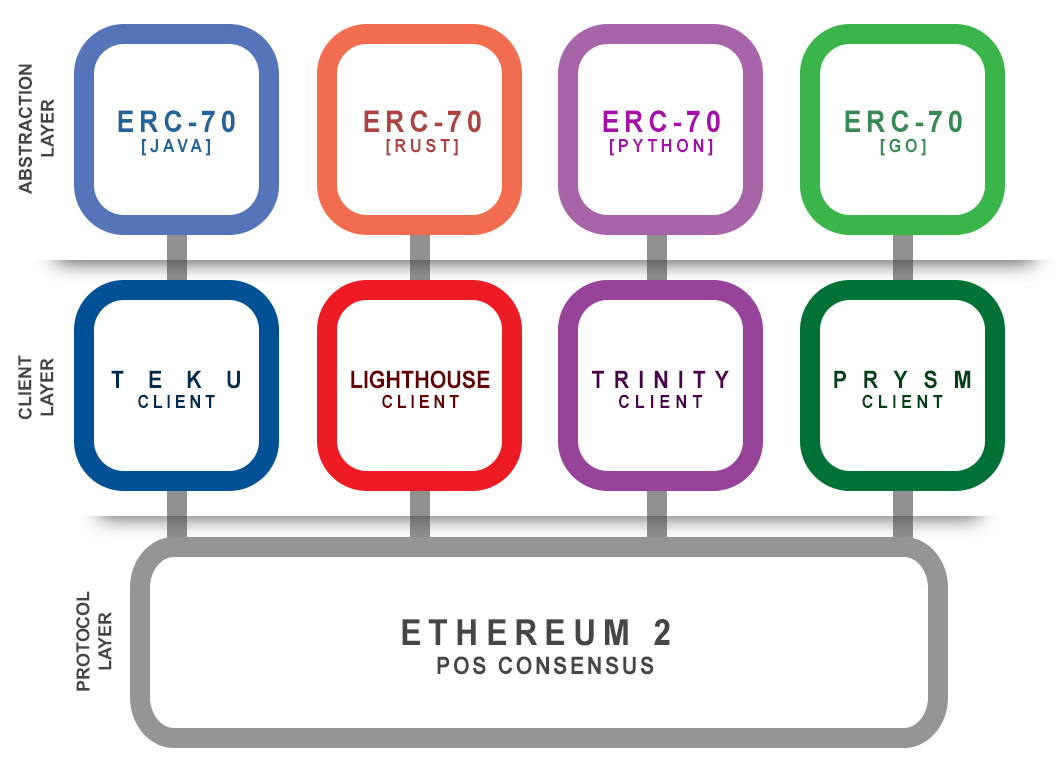
<style>
.page{position:relative;width:1061px;height:772px;background:#ffffff}
.page>*{position:absolute;margin:0}
.t1{font:18px/22px "Arial-BoldMT";color:#444444}
.t2{font:30px/19.6px "Arial-BoldMT";letter-spacing:0.18em;color:#23639b;scale:0.89 1}
.t3{font:18px/19.6px "Arial-BoldMT";letter-spacing:0.24em;color:#23639b;scale:0.89 1}
.t4{font:30px/19.6px "Arial-BoldMT";letter-spacing:0.18em;color:#af4141;scale:0.89 1}
.t5{font:18px/19.6px "Arial-BoldMT";letter-spacing:0.24em;color:#af4141;scale:0.89 1}
.t6{font:18px/19.6px "Arial-BoldMT";letter-spacing:0.24em;color:#a610aa;scale:0.89 1}
.t7{font:30px/19.6px "Arial-BoldMT";letter-spacing:0.18em;color:#a610aa;scale:0.89 1}
.t8{font:30px/19.6px "Arial-BoldMT";letter-spacing:0.18em;color:#388953;scale:0.89 1}
.t9{font:18px/19.6px "Arial-BoldMT";letter-spacing:0.24em;color:#388953;scale:0.89 1}
.t10{font:17.9px/21.9px "Arial-BoldMT";color:#444444}
.t11{font:18px/19.6px "Arial-BoldMT";letter-spacing:0.24em;color:#002b51;scale:0.89 1}
.t12{font:24px/19.6px "Arial-BoldMT";letter-spacing:1.12em;color:#002b51;scale:0.89 1}
.t13{font:24px/19.6px "Arial-BoldMT";color:#630000;scale:0.89 1}
.t14{font:18px/19.6px "Arial-BoldMT";letter-spacing:0.24em;color:#630000;scale:0.89 1}
.t15{font:24px/19.6px "Arial-BoldMT";letter-spacing:0.42em;color:#4a004c;scale:0.89 1}
.t16{font:18px/19.6px "Arial-BoldMT";letter-spacing:0.32em;color:#4a004c;scale:0.89 1}
.t17{font:18px/19.6px "Arial-BoldMT";letter-spacing:0.28em;color:#004116;scale:0.89 1}
.t18{font:24px/19.6px "Arial-BoldMT";letter-spacing:0.74em;color:#004116;scale:0.89 1}
.t19{font:24px/29.4px "Arial-BoldMT";letter-spacing:0.12em;color:#464646;scale:0.89 1}
.t20{font:36px/29.4px "Arial-BoldMT";letter-spacing:0.22em;color:#464646;scale:0.89 1}
</style>
<div class="page">
<p class="t1" style="left:18px;top:64px;width:36px;height:130px;text-align:center;rotate:-90deg">ABSTRACTION<br>LAYER</p>
<p class="t2" style="left:118px;top:110px;width:117px;height:46px;text-align:center">ERC-70<br><span class="t3">[JAVA]</span></p>
<p class="t4" style="left:364px;top:110px;width:117px;height:46px;text-align:center">ERC-70<br><span class="t5">[RUST]</span></p>
<p class="t6" style="left:603px;top:110px;width:117px;height:46px;text-align:center"><span class="t7">ERC-70<br></span>[PYTHON]</p>
<p class="t8" style="left:845px;top:110px;width:117px;height:46px;text-align:center">ERC-70<br><span class="t9">[GO]</span></p>
<p class="t10" style="left:18px;top:355px;width:36px;height:65px;text-align:center;rotate:-90deg">CLIENT<br>LAYER</p>
<p class="t11" style="left:111px;top:370px;width:129px;height:38px;text-align:center"><span class="t12">TEKU<br></span>CLIENT</p>
<p class="t13" style="left:351px;top:370px;width:139px;height:38px;text-align:center">LIGHTHOUSE<br><span class="t14">CLIENT</span></p>
<p class="t15" style="left:592px;top:370px;width:137px;height:38px;text-align:center">TRINITY<br><span class="t16">CLIENT</span></p>
<p class="t17" style="left:834px;top:370px;width:137px;height:38px;text-align:center"><span class="t18">PRYSM<br></span>CLIENT</p>
<p class="t10" style="left:76px;top:591px;width:36px;height:100px;text-align:center;rotate:-90deg">PROTOCOL<br>LAYER</p>
<p class="t19" style="left:402px;top:619px;width:268px;height:56px;text-align:center"><span class="t20">ETHEREUM 2 <br></span>POS CONSENSUS</p>
</div>
